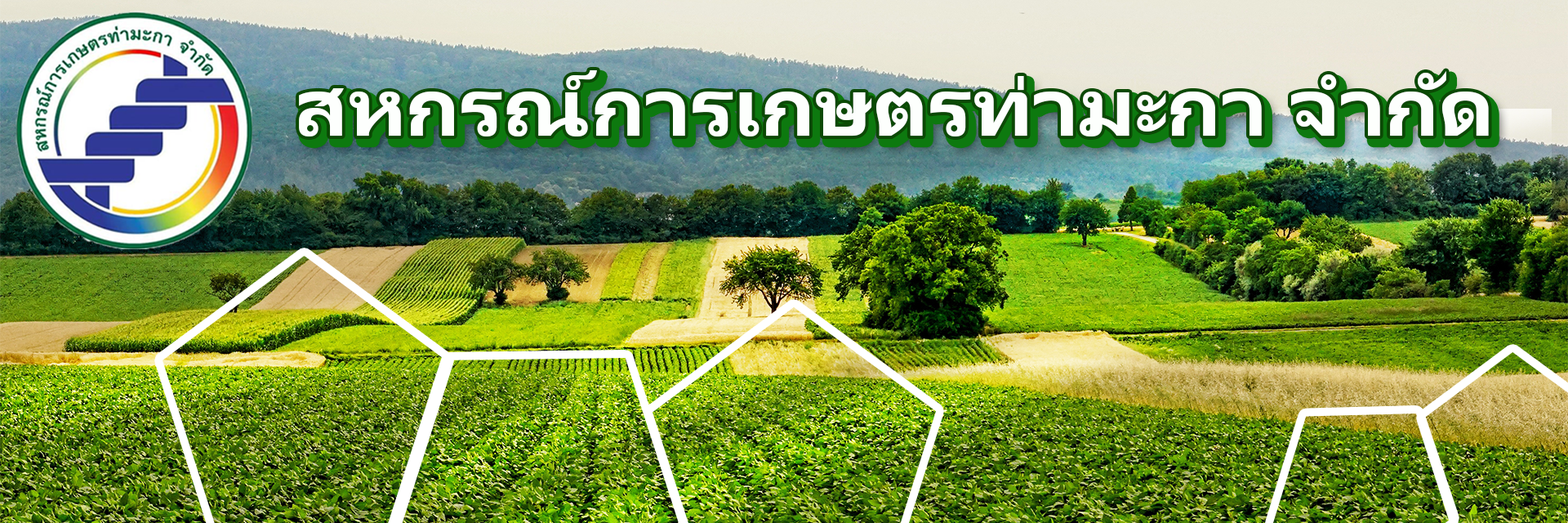
<style>
.page{position:relative;width:1568px;height:523px}
.page>*{position:absolute;margin:0}
.t1{font:86px "Leelawadee-Bold";color:#fdfffd}
</style>
<div class="page">
<p class="t1" style="left:299px;top:70px;width:1190px;height:66px">สหกรณ์การเกษตรท่ามะกา จำกัด</p>
</div>
